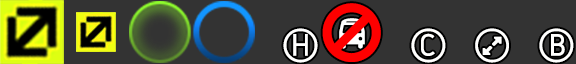
<style>
.page{position:relative;width:576px;height:64px;background:#333333}
.page>*{position:absolute;margin:0}
.t1{font:79px "SegoeUISymbol";color:#fffffe;font-weight:bold}
.t2{font:55px "Gidole-Regular";color:#fffffe;font-weight:bold}
</style>
<div class="page">
<p class="t1" style="left:283px;top:28px;width:35px;height:35px">⃝ <span class="t2">H</span></p>
<p class="t1" style="left:411px;top:28px;width:35px;height:35px">⃝ <span class="t2">C</span></p>
<p class="t1" style="left:539px;top:28px;width:35px;height:35px">⃝ <span class="t2">B</span></p>
</div>
